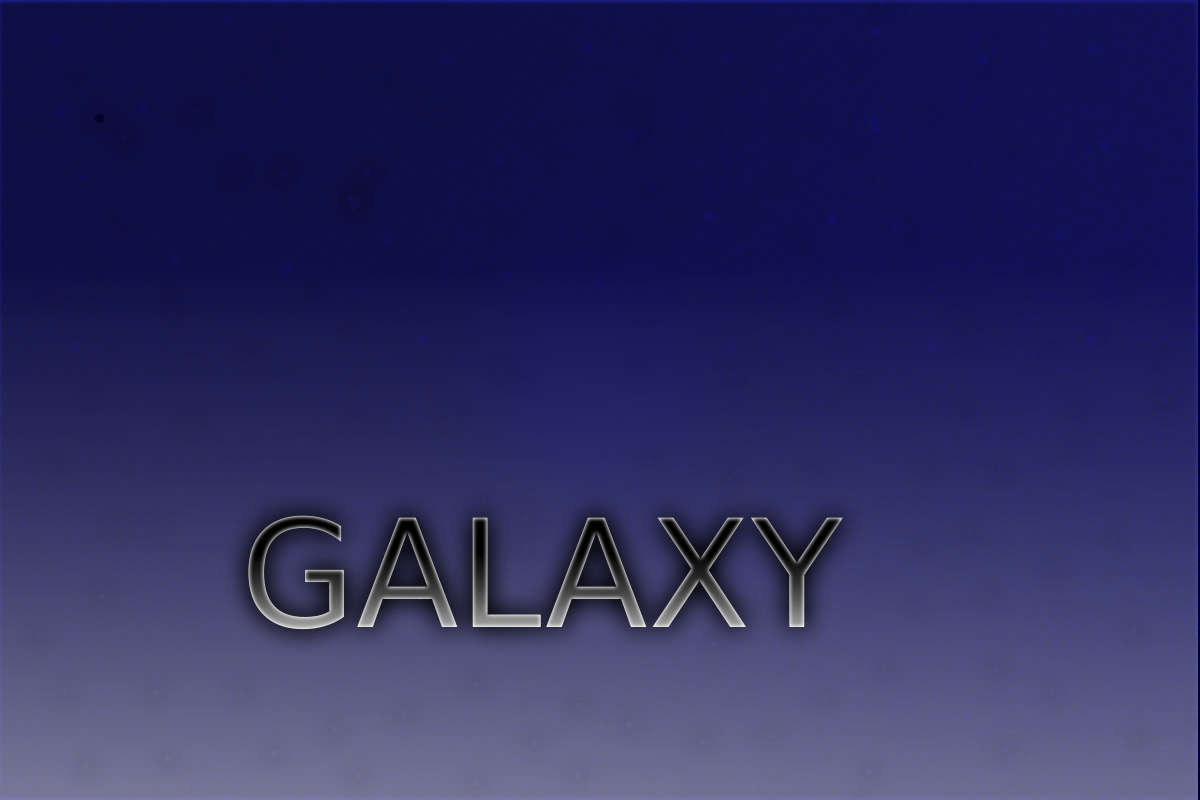
<style>
.page{position:relative;width:1200px;height:800px}
.page>*{position:absolute;margin:0}
.t1{font:150px "Arial"}
</style>
<div class="page">
<p class="t1" style="left:248px;top:515px;width:595px;height:115px">GALAXY</p>
</div>
